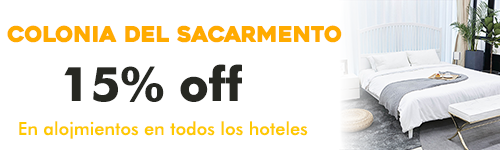
<style>
.page{position:relative;width:500px;height:150px;background:#ffffff}
.page>*{position:absolute;margin:0}
.t1{font:21.8px "Heavitas";color:#ffab00}
.t2{font:47.5px "FuturaBT-Bold";color:#272822}
.t3{font:17.8px "FuturaBT-Medium";color:#fec901}
</style>
<div class="page">
<p class="t1" style="left:7px;top:25px;width:335px;height:18px">COLONIA DEL SACARMENTO</p>
<p class="t2" style="left:64px;top:64px;width:178px;height:38px">15% off</p>
<p class="t3" style="left:19px;top:121px;width:289px;height:18px">En alojmientos en todos los hoteles</p>
</div>
